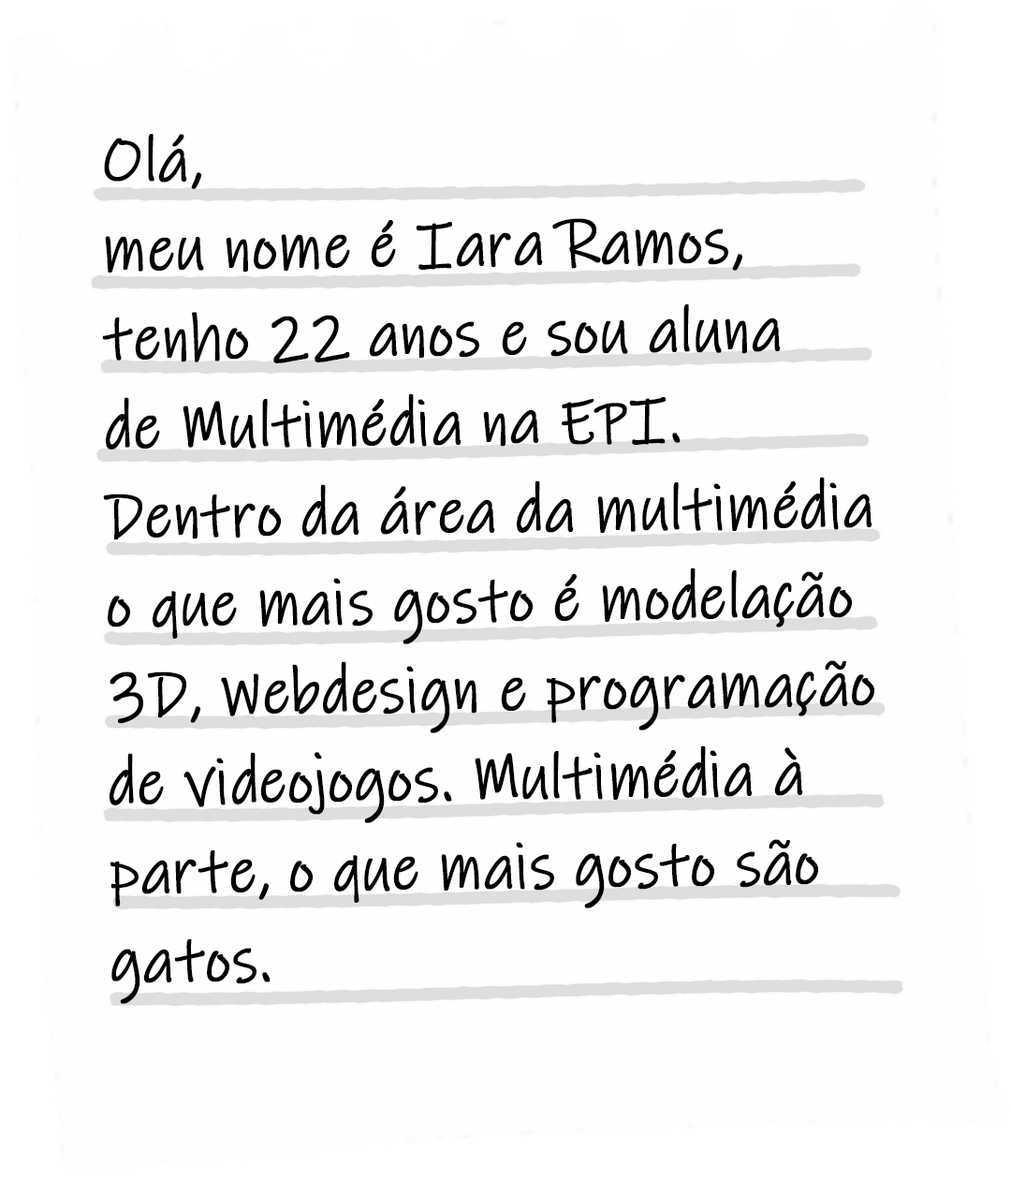
<style>
.page{position:relative;width:1011px;height:1179px;background:#fefefe}
.page>*{position:absolute;margin:0}
.t1{font:65.6px/89px "InkFree";color:#000000;font-weight:bold;scale:0.88 1}
</style>
<div class="page">
<p class="t1" style="left:102px;top:134px;width:773px;height:870px;rotate:-1deg">Olá,<br>meu nome é Iara Ramos,<br>tenho 22 anos e sou aluna<br>de Multimédia na EPI.<br>Dentro da área da multimédia<br>o que mais gosto é modelação<br>3D, Webdesign e programação<br>de videojogos. Multimédia à<br>parte, o que mais gosto são<br>gatos.</p>
</div>
